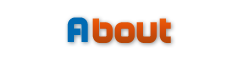
<style>
.page{position:relative;width:250px;height:60px;background:#ffffff}
.page>*{position:absolute;margin:0}
.t1{font:35px "Age";letter-spacing:0.025em;color:#006ab3}
.t2{font:35px "Age";letter-spacing:0.025em;color:#ce4b09}
</style>
<div class="page">
<p class="t1" style="left:67px;top:17px;width:21px;height:25px">A</p>
<p class="t2" style="left:92px;top:18px;width:79px;height:25px">bout</p>
</div>
